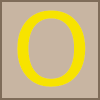
<style>
.page{position:relative;width:100px;height:100px;background:#c8b5a2}
.page>*{position:absolute;margin:0}
.t1{font:100px "LucidaGrande";color:#f7e300}
</style>
<div class="page">
<p class="t1" style="left:17px;top:10px;width:69px;height:77px">O</p>
</div>
